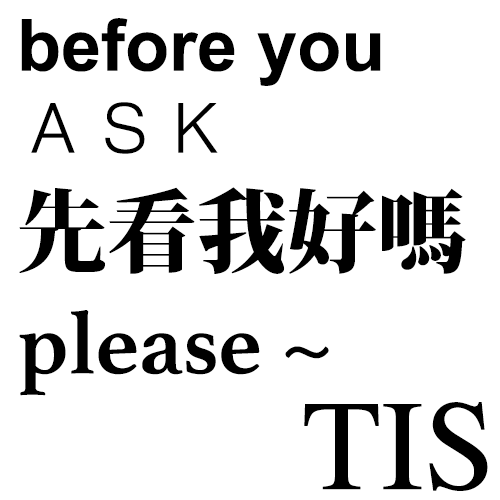
<style>
.page{position:relative;width:500px;height:500px;background:#ffffff}
.page>*{position:absolute;margin:0}
.t1{font:72px "Arial-BoldMT";color:#000000}
.t2{font:72px "STHeitiTC-Light";color:#000000}
.t3{font:90px "KozMinPr6N-Heavy";color:#000000}
.t4{font:90px "Athelas-Bold";color:#000000}
.t5{font:128.7px "Times-Roman";color:#000000}
</style>
<div class="page">
<p class="t1" style="left:19px;top:18px;width:447px;height:378px">before you <span class="t2">ＡＳＫ<br></span><span class="t3">先看我好嗎</span><span class="t4">please ~</span></p>
<p class="t5" style="left:304px;top:402px;width:184px;height:89px">TIS</p>
</div>
